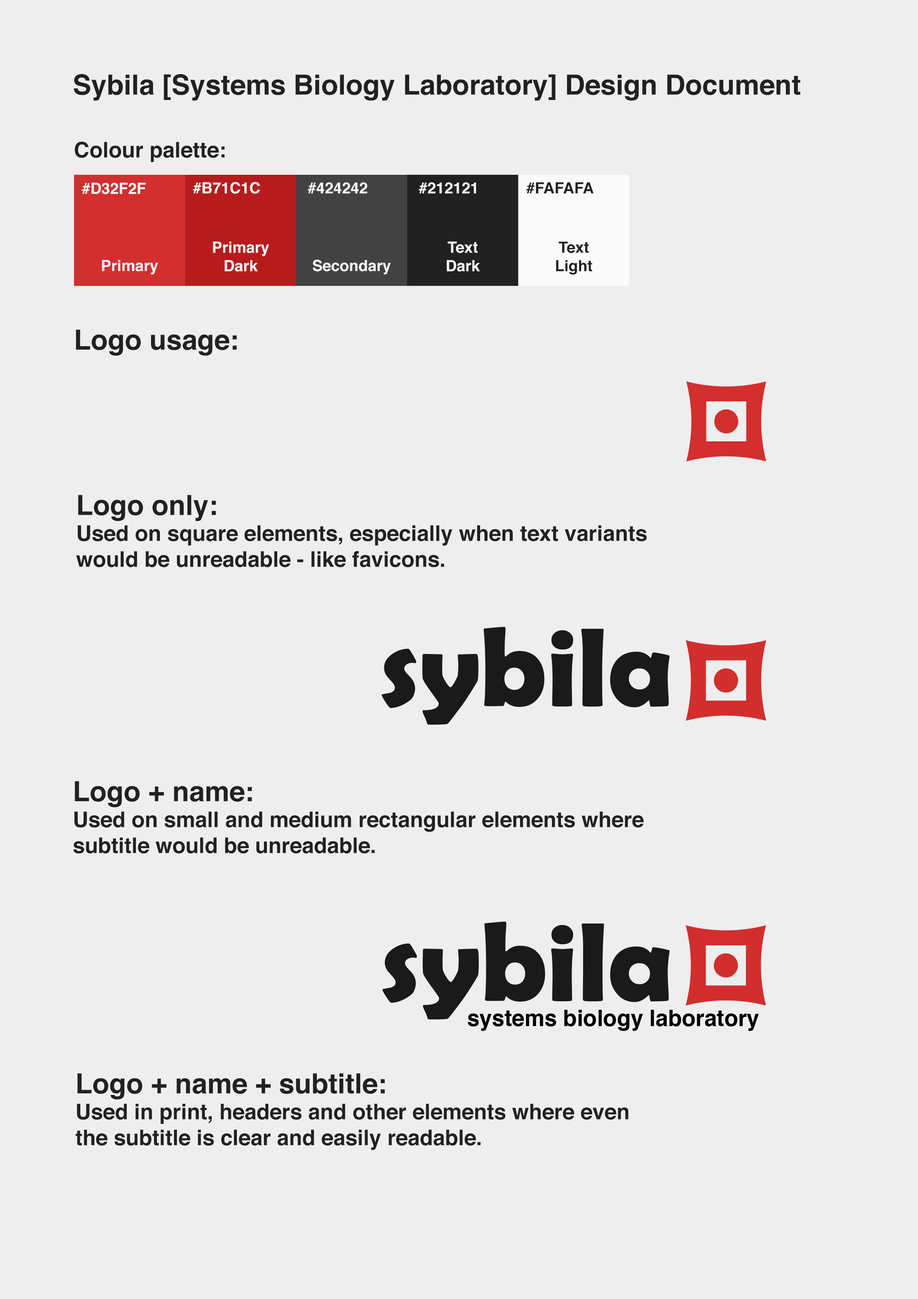
<style>
.page{position:relative;width:918px;height:1299px;background:#eeeeee}
.page>*{position:absolute;margin:0}
.t1{font:27.8px "Helvetica-Bold";color:#212121}
.t2{font:21.6px "Helvetica-Bold";color:#212121}
.t3{font:15.4px "Helvetica-Bold";color:#fafafa}
.t4{font:15.4px "Helvetica-Bold";color:#212121}
</style>
<div class="page">
<p class="t1" style="left:74px;top:74px;width:726px;height:27px">Sybila [Systems Biology Laboratory] Design Document</p>
<p class="t2" style="left:75px;top:141px;width:150px;height:21px">Colour palette:</p>
<p class="t3" style="left:81px;top:183px;width:65px;height:11px">#D32F2F</p>
<p class="t3" style="left:193px;top:182px;width:67px;height:12px">#B71C1C</p>
<p class="t3" style="left:308px;top:182px;width:59px;height:12px">#424242</p>
<p class="t3" style="left:419px;top:182px;width:57px;height:12px">#212121</p>
<p class="t4" style="left:526px;top:182px;width:68px;height:12px">#FAFAFA</p>
<p class="t3" style="left:213px;top:241px;width:56px;height:31px;text-align:center">Primary<br>Dark</p>
<p class="t3" style="left:447px;top:241px;width:33px;height:31px;text-align:center">Text<br>Dark</p>
<p class="t4" style="left:556px;top:241px;width:36px;height:34px;text-align:center">Text<br>Light</p>
<p class="t3" style="left:102px;top:260px;width:56px;height:14px">Primary</p>
<p class="t3" style="left:313px;top:260px;width:78px;height:14px">Secondary</p>
<p class="t1" style="left:76px;top:329px;width:161px;height:27px">Logo usage:</p>
<p class="t2" style="left:76px;top:495px;width:571px;height:72px"><span class="t1">Logo only:<br></span>Used on square elements, especially when text variants <br>would be unreadable - like favicons.</p>
<p class="t2" style="left:73px;top:781px;width:571px;height:72px"><span class="t1">Logo + name:<br></span>Used on small and medium rectangular elements where <br>subtitle would be unreadable.</p>
<p class="t2" style="left:76px;top:1073px;width:553px;height:77px"><span class="t1">Logo + name + subtitle:<br></span>Used in print, headers and other elements where even <br>the subtitle is clear and easily readable.</p>
</div>
